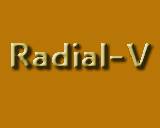
<style>
.page{position:relative;width:160px;height:128px;background:#b77605}
.page>*{position:absolute;margin:0}
.t1{font:32px "EstelleBlackSF";scale:1.36 1}
</style>
<div class="page">
<p class="t1" style="left:11px;top:43px;width:140px;height:25px">Radial-V</p>
</div>
